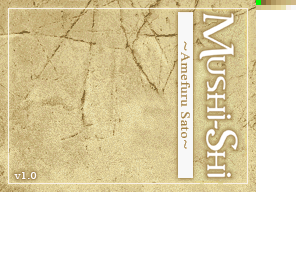
<style>
.page{position:relative;width:296px;height:256px;background:#ffffff}
.page>*{position:absolute;margin:0}
.t1{font:12.6px "TimesNewRomanPSMT";letter-spacing:0.05em;color:#a08048;scale:1.11 1}
.t2{font:12.6px "KozGoPr6N-Regular";letter-spacing:0.05em;color:#a08048;scale:1.22 1}
.t3{font:10px "TimesNewRomanPSMT";letter-spacing:0.03em;color:#ffffff;scale:1.2 1}
</style>
<div class="page">
<p class="t1" style="left:181px;top:41px;width:9px;height:108px;rotate:90deg"><span class="t2">~</span>Amefuru Sato<span class="t2">~</span></p>
<p class="t3" style="left:14px;top:172px;width:23px;height:7px">v1.0</p>
</div>
